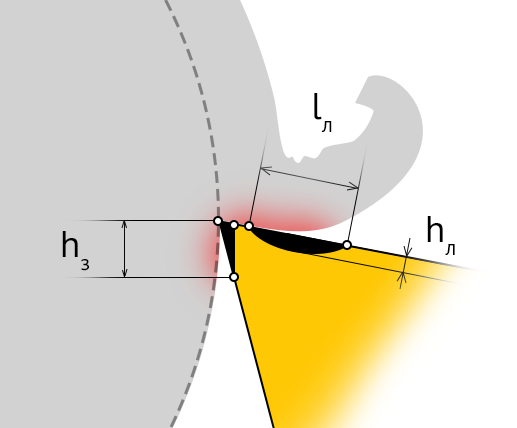
<style>
.page{position:relative;width:517px;height:428px;background:#d2d2d2}
.page>*{position:absolute;margin:0}
.t1{font:37.4px "PTSans-Regular";color:#000000}
</style>
<div class="page">
<p class="t1" style="left:314px;top:93px;width:18px;height:39px">lл</p>
<p class="t1" style="left:427px;top:216px;width:28px;height:39px">hл</p>
<p class="t1" style="left:62px;top:231px;width:27px;height:40px">hз</p>
</div>
